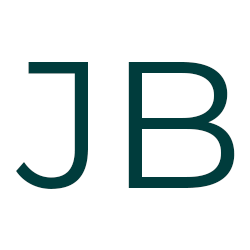
<style>
.page{position:relative;width:250px;height:250px;background:#ffffff}
.page>*{position:absolute;margin:0}
.t1{font:180.7px "Montserrat-Regular";color:#003c3c}
</style>
<div class="page">
<p class="t1" style="left:16px;top:62px;width:219px;height:127px">JB</p>
</div>
